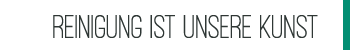
<style>
.page{position:relative;width:350px;height:50px;background:#ffffff}
.page>*{position:absolute;margin:0}
.t1{font:34px "OstrichSans-Medium";color:#2f3735}
</style>
<div class="page">
<p class="t1" style="left:53px;top:15px;width:265px;height:23px">reinigung ist unsere kunst</p>
</div>
